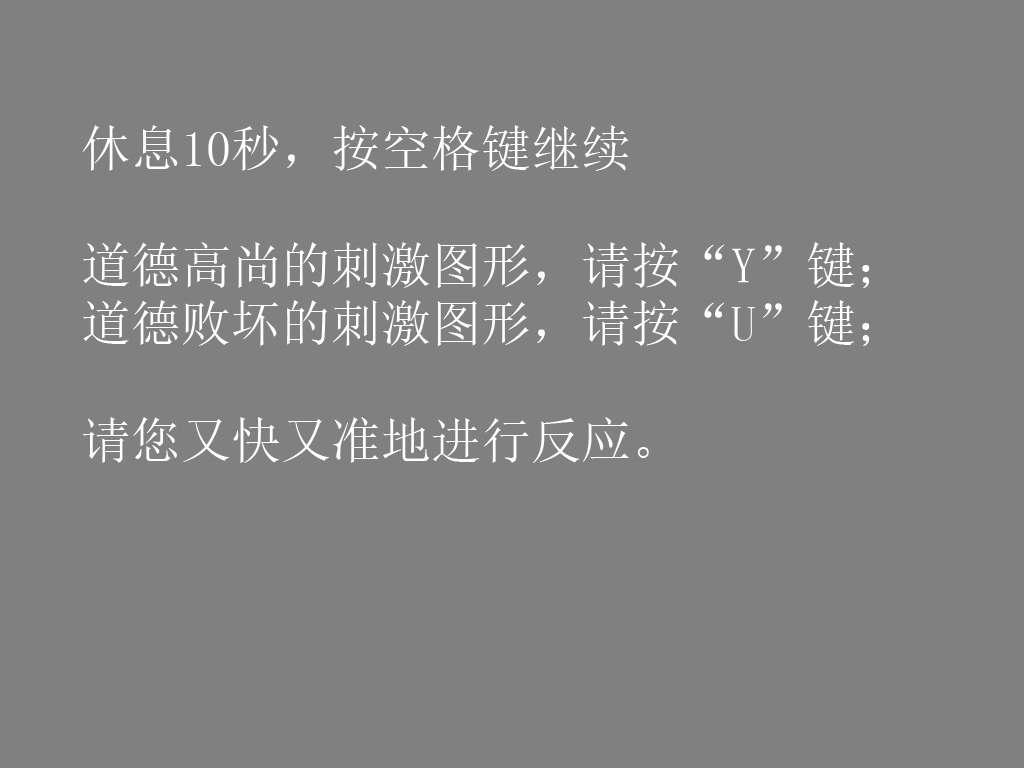
<style>
.page{position:relative;width:1024px;height:768px;background:#808080}
.page>*{position:absolute;margin:0}
.t1{font:50px/58.3px "SimSun";color:#ffffff}
</style>
<div class="page">
<p class="t1" style="left:82px;top:125px;width:788px;height:338px">休息10秒，按空格键继续<br><br>道德高尚的刺激图形，请按“Y”键；<br>道德败坏的刺激图形，请按“U”键；<br><br>请您又快又准地进行反应。</p>
</div>
